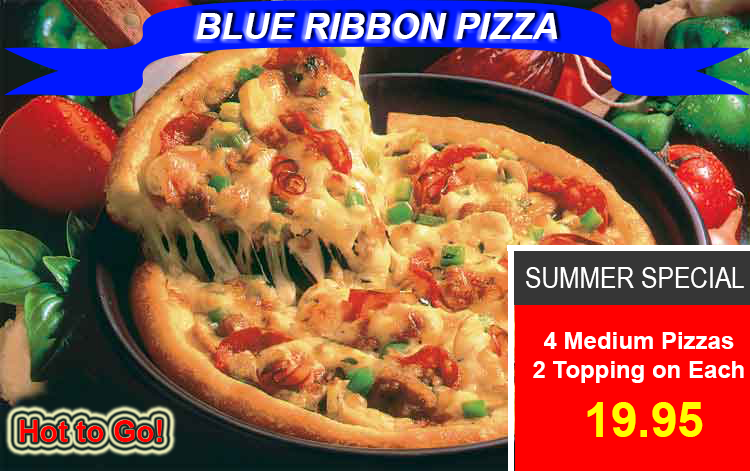
<style>
.page{position:relative;width:750px;height:471px}
.page>*{position:absolute;margin:0}
.t1{font:36px "Arial-BoldItalicMT";color:#ffffff}
.t2{font:30px "ArialNarrow";color:#ffffff}
.t3{font:24px "Arial-BoldMT";color:#ffffff}
.t4{font:48px "Arial-BoldMT";color:#fffc00}
.t5{font:30px "Arial-BoldMT";color:#ff0000}
</style>
<div class="page">
<p class="t1" style="left:196px;top:13px;width:362px;height:26px">BLUE RIBBON PIZZA</p>
<p class="t2" style="left:526px;top:267px;width:218px;height:21px">SUMMER SPECIAL</p>
<p class="t3" style="left:533px;top:332px;width:211px;height:51px;text-align:center">4 Medium Pizzas<br>2 Topping on Each</p>
<p class="t4" style="left:587px;top:402px;width:116px;height:35px">19.95</p>
<p class="t5" style="left:20px;top:420px;width:142px;height:22px">Hot to Go!</p>
</div>
